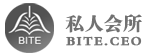
<style>
.page{position:relative;width:143px;height:55px;background:#ffffff}
.page>*{position:absolute;margin:0}
.t1{font:19.3px "FZDBSJW--GB1-0";letter-spacing:-0.03em;color:#717171;font-weight:bold}
.t2{font:12.7px "FZDBSJW--GB1-0";letter-spacing:0.11em;color:#717171;font-weight:bold}
</style>
<div class="page">
<p class="t1" style="left:65px;top:14px;width:77px;height:19px">私人会所</p>
<p class="t2" style="left:66px;top:36px;width:76px;height:10px">BITE.CEO</p>
</div>
